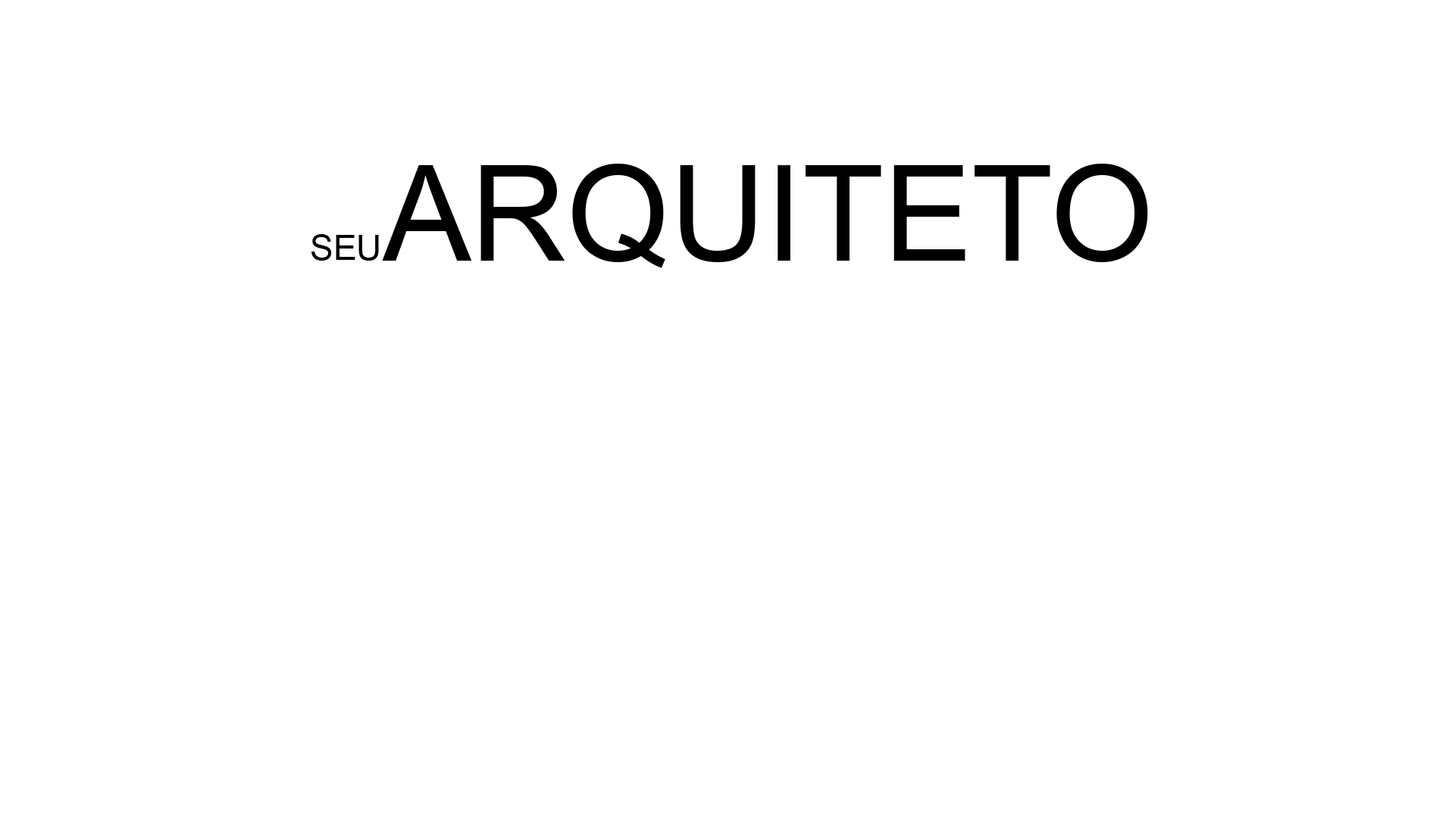
<style>
.page{position:relative;width:1455px;height:819px;background:#ffffff}
.page>*{position:absolute;margin:0}
.t1{font:132.6px "ArialMT";color:#000000}
.t2{font:34.7px "ArialMT";color:#000000}
</style>
<div class="page">
<p class="t1" style="left:382px;top:164px;width:766px;height:104px">ARQUITETO</p>
<p class="t2" style="left:312px;top:234px;width:67px;height:27px">SEU</p>
</div>
